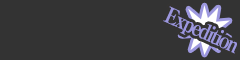
<style>
.page{position:relative;width:240px;height:60px;background:#333333}
.page>*{position:absolute;margin:0}
.t1{font:22px "RyuminPro-ExBold";letter-spacing:-0.12em;color:#9c97de;scale:0.9 1}
</style>
<div class="page">
<p class="t1" style="left:163px;top:6px;width:74px;height:48px;rotate:25deg">Expedition</p>
</div>
